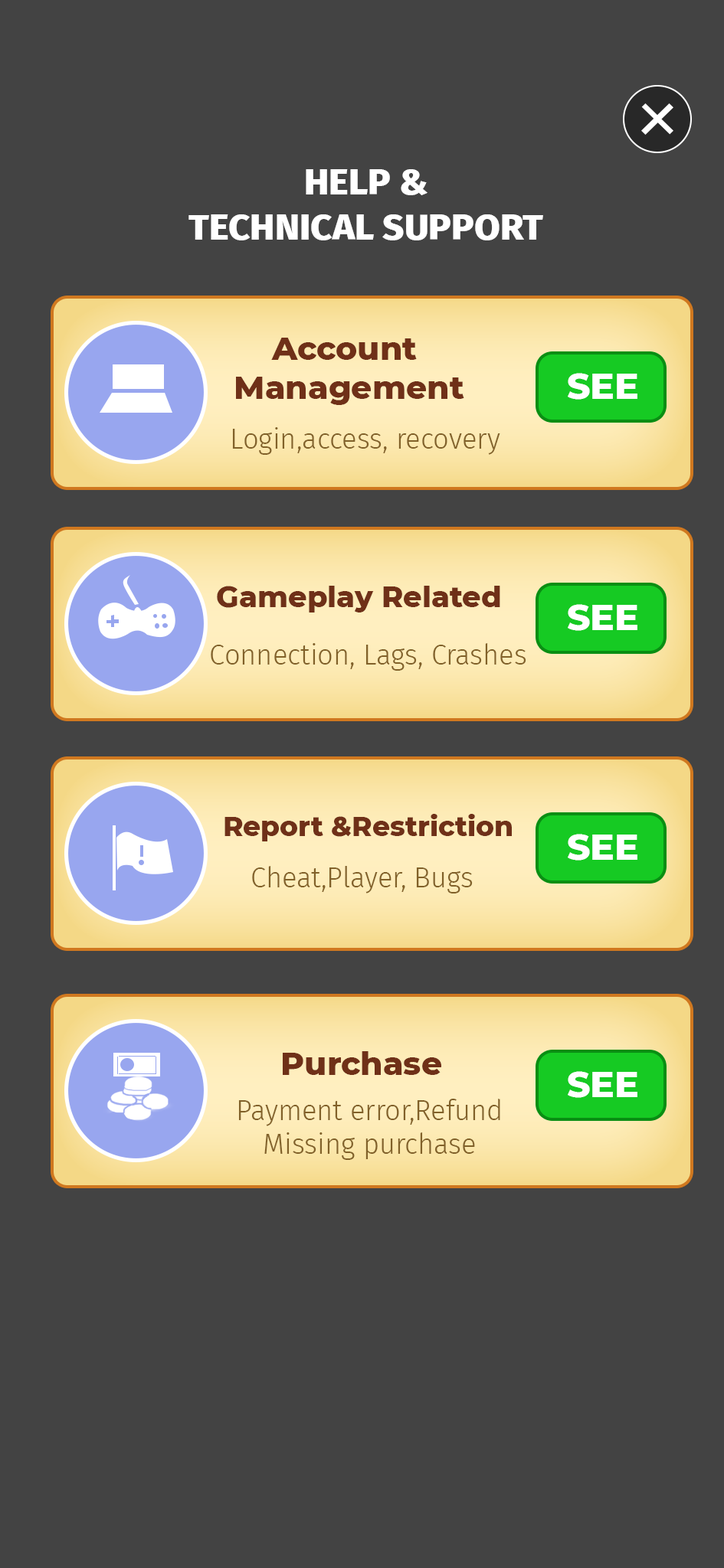
<style>
.page{position:relative;width:724px;height:1568px;background:#434343}
.page>*{position:absolute;margin:0}
.t1{font:35.6px "FiraSans-ExtraBold";color:#ffffff;scale:1.05 1}
.t2{font:32.4px "Montserrat-ExtraBold";color:#6f3018}
.t3{font:36.2px "Montserrat-ExtraBold";color:#ffffff}
.t4{font:27.8px "FiraSans-Light";color:#816129}
.t5{font:29.4px "Montserrat-ExtraBold";color:#6f3018}
.t6{font:27.6px "Montserrat-ExtraBold";color:#6f3018}
</style>
<div class="page">
<p class="t1" style="left:188px;top:169px;width:355px;height:71px;text-align:center">HELP &amp;<br>TECHNICAL SUPPORT</p>
<p class="t2" style="left:236px;top:338px;width:228px;height:67px;text-align:center">Account <br>Management</p>
<p class="t3" style="left:567px;top:373px;width:70px;height:27px">SEE</p>
<p class="t4" style="left:232px;top:427px;width:268px;height:28px">Login,access, recovery</p>
<p class="t5" style="left:217px;top:586px;width:283px;height:26px">Gameplay Related</p>
<p class="t3" style="left:567px;top:604px;width:70px;height:27px">SEE</p>
<p class="t4" style="left:211px;top:643px;width:315px;height:28px">Connection, Lags, Crashes</p>
<p class="t6" style="left:224px;top:814px;width:287px;height:27px">Report &amp;Restriction</p>
<p class="t3" style="left:567px;top:834px;width:70px;height:27px">SEE</p>
<p class="t4" style="left:252px;top:866px;width:220px;height:27px">Cheat,Player, Bugs</p>
<p class="t2" style="left:283px;top:1051px;width:158px;height:24px">Purchase</p>
<p class="t3" style="left:567px;top:1071px;width:70px;height:27px">SEE</p>
<p class="t4" style="left:238px;top:1099px;width:262px;height:61px;text-align:center">Payment error,Refund<br>Missing purchase</p>
</div>
